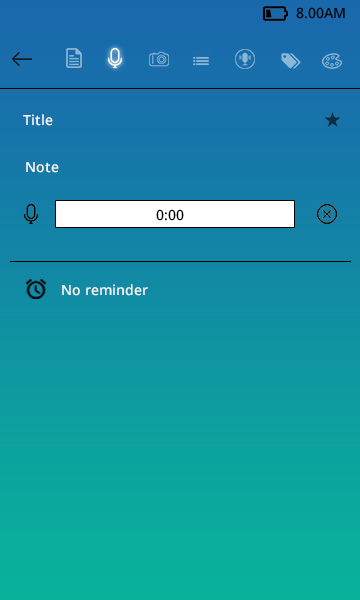
<style>
.page{position:relative;width:360px;height:600px}
.page>*{position:absolute;margin:0}
.t1{font:14px "OpenSans-Semibold";color:#000000}
.t2{font:14px "OpenSans-Semibold";color:#fbf8f8}
</style>
<div class="page">
<p class="t1" style="left:296px;top:7px;width:49px;height:12px">8.00AM</p>
<p class="t2" style="left:23px;top:114px;width:30px;height:12px">Title</p>
<p class="t2" style="left:26px;top:162px;width:33px;height:11px">Note</p>
<p class="t1" style="left:156px;top:209px;width:28px;height:12px">0:00</p>
<p class="t2" style="left:62px;top:284px;width:86px;height:12px">No reminder</p>
</div>
